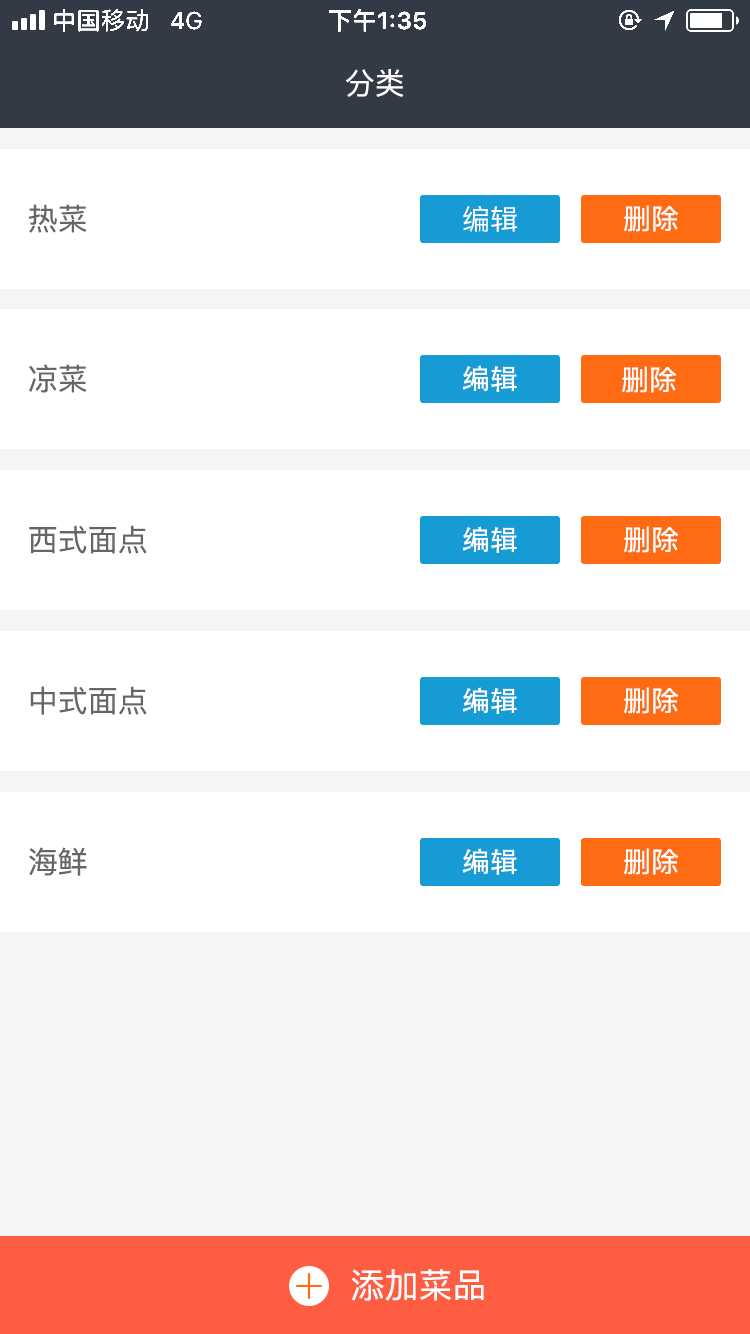
<style>
.page{position:relative;width:750px;height:1334px;background:#ffffff}
.page>*{position:absolute;margin:0}
.t1{font:30px "PingFang-SC-Medium";color:#ffffff}
.t2{font:30px "PingFang-SC-Medium";color:#666666}
.t3{font:28px "PingFang-SC-Medium";color:#ffffff}
.t4{font:28px "AdobeHeitiStd-Regular";color:#ffffff}
.t5{font:34px "PingFang-SC-Medium";color:#ffffff}
</style>
<div class="page">
<p class="t1" style="left:346px;top:69px;width:58px;height:28px">分类</p>
<p class="t2" style="left:28px;top:204px;width:59px;height:29px">热菜</p>
<p class="t3" style="left:463px;top:206px;width:54px;height:26px">编辑</p>
<p class="t3" style="left:624px;top:205px;width:55px;height:27px">删除</p>
<p class="t2" style="left:29px;top:364px;width:58px;height:29px">凉菜</p>
<p class="t4" style="left:462px;top:365px;width:55px;height:27px">编辑</p>
<p class="t3" style="left:622px;top:366px;width:55px;height:27px">删除</p>
<p class="t2" style="left:29px;top:525px;width:118px;height:29px">西式面点</p>
<p class="t4" style="left:462px;top:526px;width:55px;height:27px">编辑</p>
<p class="t3" style="left:624px;top:526px;width:55px;height:27px">删除</p>
<p class="t2" style="left:30px;top:686px;width:117px;height:29px">中式面点</p>
<p class="t4" style="left:462px;top:687px;width:55px;height:27px">编辑</p>
<p class="t3" style="left:624px;top:687px;width:55px;height:27px">删除</p>
<p class="t2" style="left:29px;top:847px;width:58px;height:29px">海鲜</p>
<p class="t4" style="left:462px;top:848px;width:55px;height:27px">编辑</p>
<p class="t3" style="left:624px;top:848px;width:55px;height:27px">删除</p>
<p class="t5" style="left:351px;top:1269px;width:133px;height:32px">添加菜品</p>
</div>
